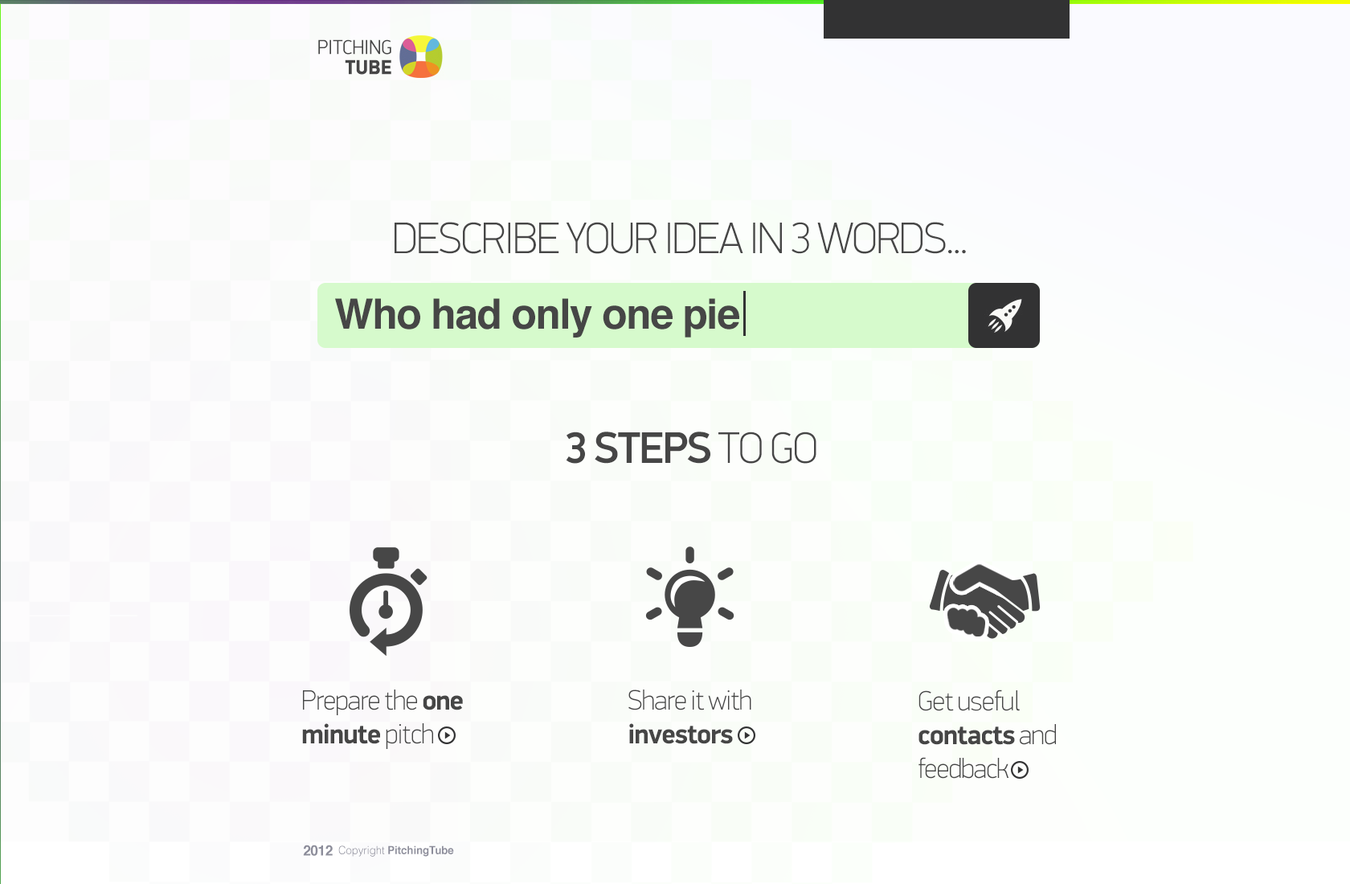
<style>
.page{position:relative;width:1350px;height:884px}
.page>*{position:absolute;margin:0}
.t1{font:20.3px/20.1px "DinDisplayProPF-Light";color:#464646;text-transform:uppercase;scale:0.96 1}
.t2{font:20.3px/20.1px "DinDisplayProPF-Black";color:#464646;text-transform:uppercase;scale:0.96 1}
.t3{font:44.2px "DinDisplayProPF-Thin";letter-spacing:-0.03em;color:#464646}
.t4{font:41.8px "Helvetica-Bold";letter-spacing:-0.03em;color:#464646}
.t5{font:44.2px "DinDisplayProPF-Medium";letter-spacing:-0.03em;color:#464646;text-transform:uppercase}
.t6{font:44.2px "DinDisplayProPF-Thin";letter-spacing:-0.03em;color:#464646;text-transform:uppercase}
.t7{font:28.1px "DinDisplayProPF-Thin";letter-spacing:-0.03em;color:#464646}
.t8{font:28.1px "DinDisplayProPF-Bold";letter-spacing:-0.03em;color:#464646}
.t9{font:14.1px "Helvetica-Bold";letter-spacing:-0.025em;color:#8d8e9b}
.t10{font:11px "Helvetica-Bold";color:#8d8e9b;scale:0.96 1}
.t11{font:11px "Helvetica-Light";color:#8d8e9b;scale:0.96 1}
</style>
<div class="page">
<p class="t1" style="left:318px;top:39px;width:73px;height:36px;text-align:right">Pitching<br><span class="t2">Tube</span></p>
<p class="t3" style="left:394px;top:222px;width:572px;height:32px">DESCRIBE YOUR IDEA IN 3 WORDS...</p>
<p class="t4" style="left:335px;top:298px;width:404px;height:39px">Who had only one pie</p>
<p class="t5" style="left:566px;top:431px;width:250px;height:32px">3 steps<span class="t6"> to go</span></p>
<p class="t7" style="left:302px;top:689px;width:161px;height:60px">Prepare the <span class="t8">one <br>minute</span> pitch</p>
<p class="t7" style="left:628px;top:689px;width:123px;height:55px">Share it with <br><span class="t8">investors</span></p>
<p class="t7" style="left:918px;top:689px;width:138px;height:89px">Get useful <br><span class="t8">contacts </span>and <br>feedback</p>
<p class="t9" style="left:303px;top:844px;width:30px;height:11px">2012</p>
<p class="t10" style="left:338px;top:845px;width:116px;height:11px"><span class="t11">Copyright </span>PitchingTube</p>
</div>
